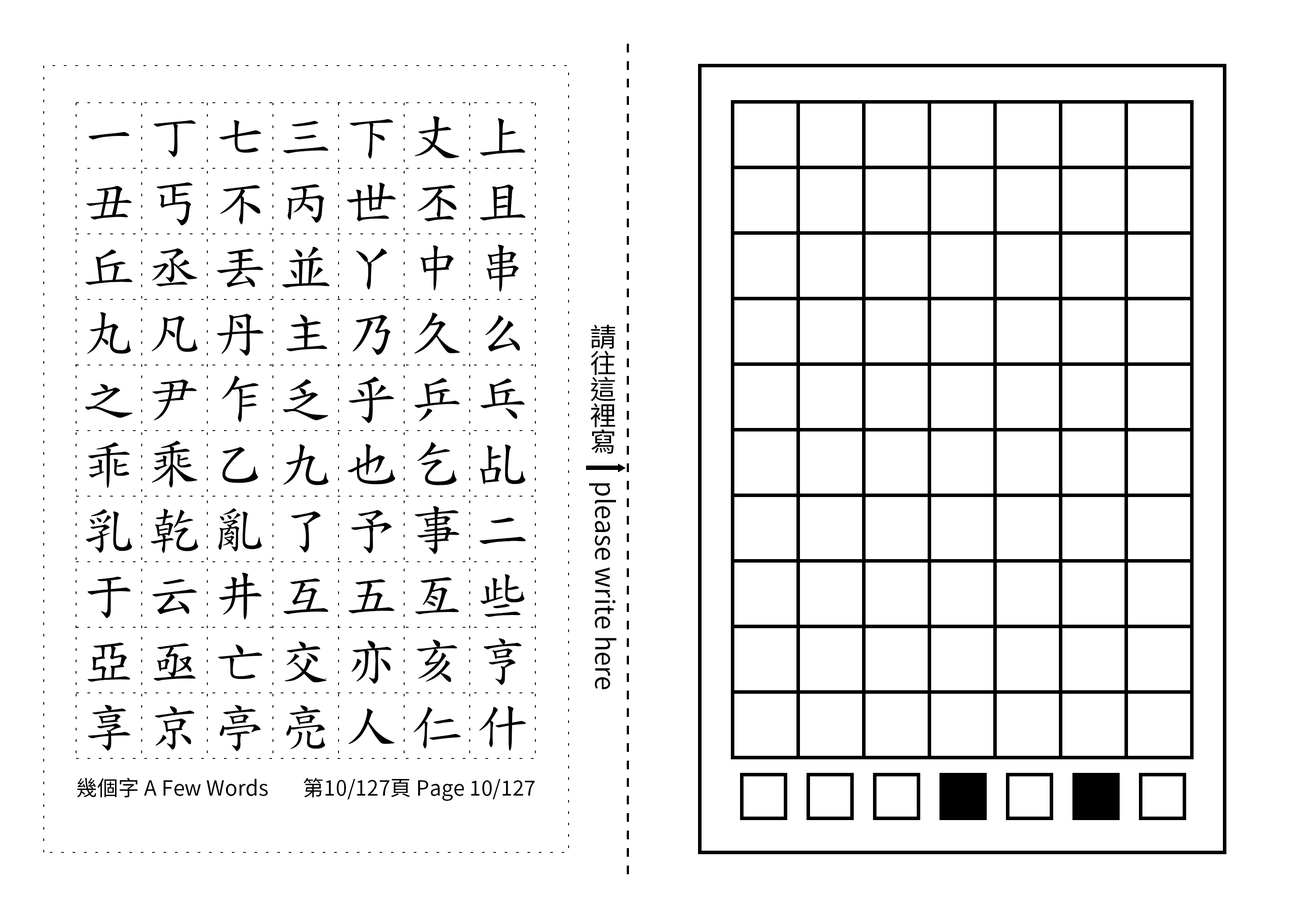
<style>
.page{position:relative;width:1299px;height:918px;background:#ffffff}
.page>*{position:absolute;margin:0}
.t1{font:52.5px/65.6px "TW-Kai-98_1";letter-spacing:0.25em;color:#000000}
.t2{font:26.2px "SourceHanSansTC-Regular";color:#000000}
.t3{font:21px "SourceHanSansTC-Regular";color:#000000}
</style>
<div class="page">
<p class="t1" style="left:85px;top:116px;width:441px;height:636px;text-align:center">一丁七三下丈上丑丐不丙世丕且丘丞丟並丫中串丸凡丹主乃久么之尹乍乏乎乒乓乖乘乙九也乞乩乳乾亂了予事二于云井互五亙些亞亟亡交亦亥亨享京亭亮人仁什</p>
<p class="t2" style="left:589px;top:324px;width:28px;height:366px;text-align:center">請往這裡寫　please write here</p>
<p class="t3" style="left:77px;top:778px;width:191px;height:20px">幾個字 A Few Words</p>
<p class="t3" style="left:303px;top:778px;width:232px;height:23px">第10/127頁 Page 10/127</p>
</div>
